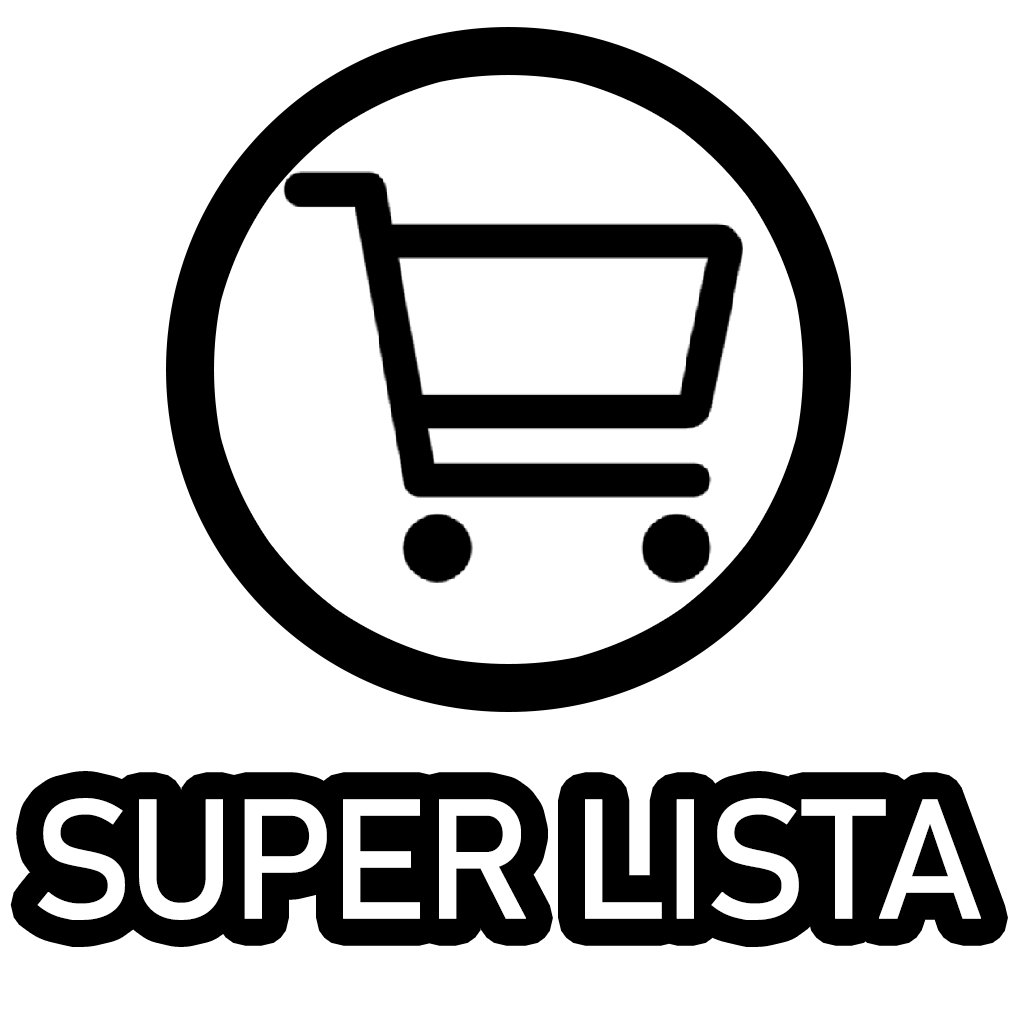
<style>
.page{position:relative;width:1024px;height:1024px;background:#ffffff}
.page>*{position:absolute;margin:0}
.t1{font:167.3px "Bahnschrift";letter-spacing:-0.05em;color:#ffffff;font-weight:bold}
</style>
<div class="page">
<p class="t1" style="left:37px;top:798px;width:944px;height:122px">SUPER LISTA</p>
</div>
